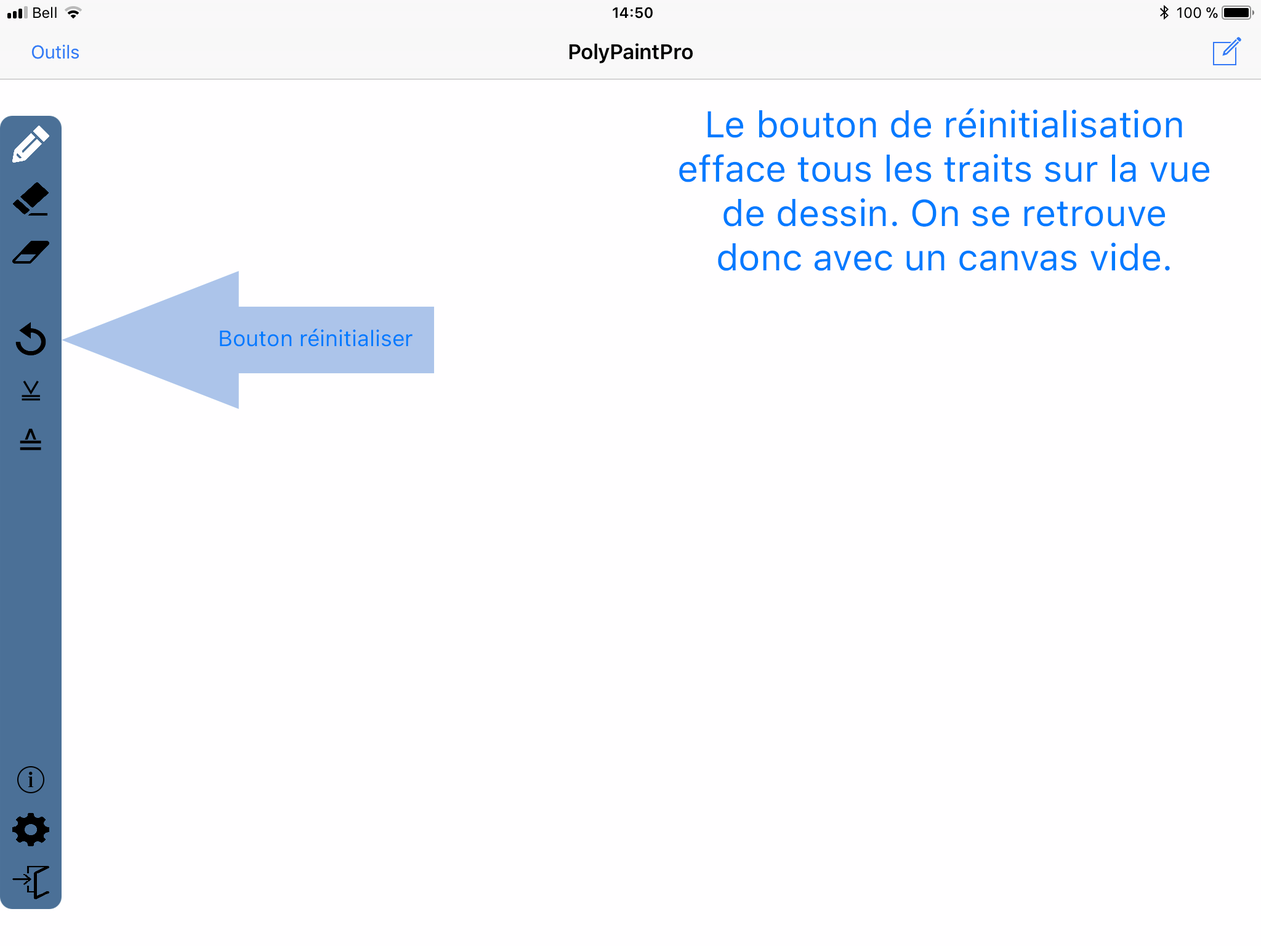
<style>
.page{position:relative;width:1261px;height:946px;background:#fffeff}
.page>*{position:absolute;margin:0}
.t1{font:36.9px "SFProText-Regular";color:#007aff}
.t2{font:22.2px "SFProText-Regular";color:#007aff}
</style>
<div class="page">
<p class="t1" style="left:679px;top:108px;width:530px;height:163px;text-align:center">Le bouton de réinitialisation efface tous les traits sur la vue de dessin. On se retrouve donc avec un canvas vide.</p>
<p class="t2" style="left:220px;top:328px;width:193px;height:19px">Bouton réinitialiser</p>
</div>
